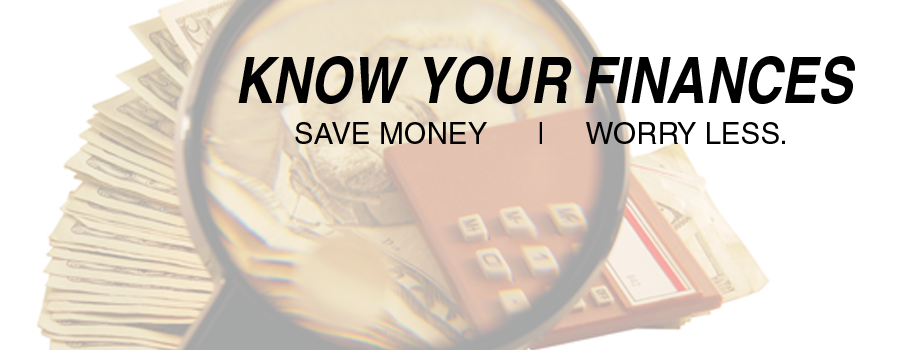
<style>
.page{position:relative;width:900px;height:350px;background:#ffffff}
.page>*{position:absolute;margin:0}
.t1{font:64.6px "Helvetica-Narrow-BoldOblique";color:#000000;text-transform:uppercase}
.t2{font:29.6px "Helvetica";color:#000000;text-transform:uppercase}
</style>
<div class="page">
<p class="t1" style="left:238px;top:56px;width:617px;height:48px">Know your finances</p>
<p class="t2" style="left:295px;top:122px;width:490px;height:22px">Save money  | Worry less.</p>
</div>
